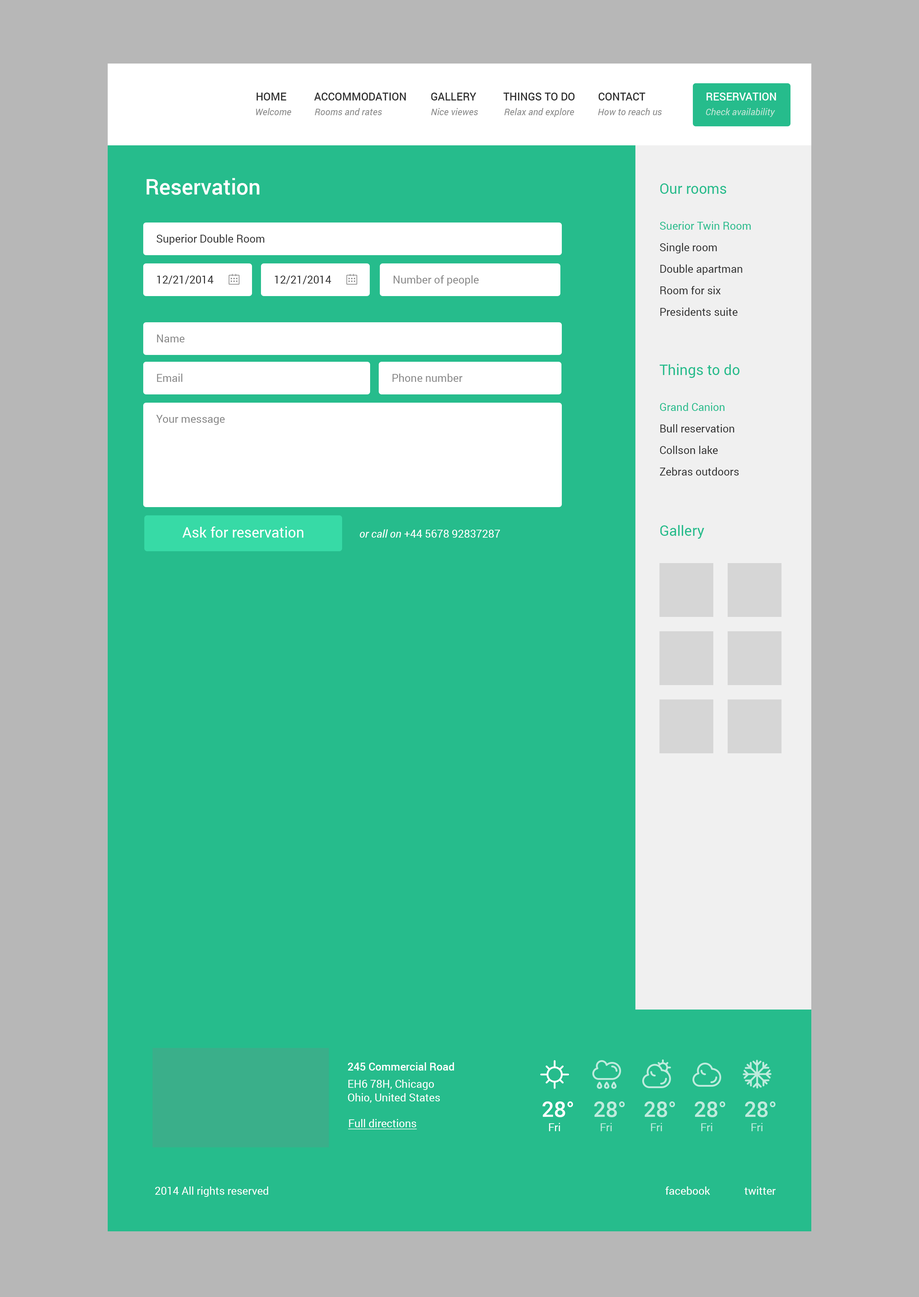
<style>
.page{position:relative;width:919px;height:1297px;background:#26bc8c}
.page>*{position:absolute;margin:0}
.t1{font:10.8px "Roboto-Medium";color:#333333;text-transform:uppercase}
.t2{font:10.8px "Roboto-Medium";color:#fffefe;text-transform:uppercase}
.t3{font:9.3px "Roboto-Italic";color:#888888}
.t4{font:9.3px "Roboto-Italic";color:#bde6d6}
.t5{font:21.5px "Roboto-Medium";color:#ffffff}
.t6{font:14.4px "Roboto-Regular";color:#26bc8c}
.t7{font:10.8px/21.5px "Roboto-Regular";color:#333333}
.t8{font:10.8px/21.5px "Roboto-Regular";color:#26bc8c}
.t9{font:10.8px "Roboto-Regular";color:#333333}
.t10{font:10.8px "Roboto-Regular";color:#888888}
.t11{font:14.4px "Roboto-Regular";color:#ffffff}
.t12{font:10.8px "Roboto-Regular";color:#ffffff}
.t13{font:10.8px "Roboto-Italic";color:#ffffff}
.t14{font:10.8px/13.6px "Roboto-Medium";color:#ffffff}
.t15{font:10.8px/17.2px "Roboto-Regular";color:#ffffff}
.t16{font:10.8px/13.6px "Roboto-Regular";color:#ffffff}
.t17{font:21.5px "Roboto-Medium";color:#beebdd}
.t18{font:10.8px "Roboto-Regular";color:#ffffff;text-decoration:underline}
.t19{font:10.8px "Roboto-Regular";color:#beebdd}
</style>
<div class="page">
<p class="t1" style="left:256px;top:93px;width:30px;height:8px">Home</p>
<p class="t1" style="left:314px;top:93px;width:92px;height:8px">Accommodation</p>
<p class="t1" style="left:431px;top:93px;width:45px;height:8px">Gallery</p>
<p class="t1" style="left:503px;top:93px;width:72px;height:8px">Things to do</p>
<p class="t1" style="left:598px;top:93px;width:47px;height:8px">Contact</p>
<p class="t2" style="left:707px;top:93px;width:69px;height:8px">Reservation</p>
<p class="t3" style="left:256px;top:108px;width:35px;height:7px">Welcome</p>
<p class="t3" style="left:315px;top:108px;width:67px;height:7px">Rooms and rates</p>
<p class="t3" style="left:431px;top:108px;width:47px;height:7px">Nice viewes</p>
<p class="t3" style="left:504px;top:108px;width:70px;height:9px">Relax and explore</p>
<p class="t3" style="left:598px;top:108px;width:64px;height:7px">How to reach us</p>
<p class="t4" style="left:706px;top:108px;width:69px;height:9px">Check availability</p>
<p class="t5" style="left:146px;top:178px;width:114px;height:17px">Reservation</p>
<p class="t6" style="left:660px;top:183px;width:66px;height:11px">Our rooms</p>
<p class="t7" style="left:660px;top:222px;width:91px;height:94px"><span class="t8">Suerior Twin Room<br></span>Single room<br>Double apartman<br>Room for six<br>Presidents suite</p>
<p class="t9" style="left:157px;top:234px;width:108px;height:11px">Superior Double Room</p>
<p class="t9" style="left:157px;top:276px;width:57px;height:8px">12/21/2014</p>
<p class="t9" style="left:275px;top:276px;width:56px;height:8px">12/21/2014</p>
<p class="t10" style="left:393px;top:275px;width:86px;height:11px">Number of people</p>
<p class="t10" style="left:157px;top:335px;width:28px;height:7px">Name</p>
<p class="t6" style="left:659px;top:364px;width:81px;height:14px">Things to do</p>
<p class="t10" style="left:157px;top:374px;width:25px;height:8px">Email</p>
<p class="t10" style="left:392px;top:374px;width:70px;height:8px">Phone number</p>
<p class="t7" style="left:660px;top:403px;width:79px;height:73px"><span class="t8">Grand Canion<br></span>Bull reservation<br>Collson lake<br>Zebras outdoors</p>
<p class="t10" style="left:156px;top:415px;width:69px;height:10px">Your message</p>
<p class="t11" style="left:182px;top:527px;width:121px;height:11px">Ask for reservation</p>
<p class="t12" style="left:360px;top:530px;width:140px;height:8px"><span class="t13">or call on </span>+44 5678 92837287</p>
<p class="t6" style="left:660px;top:525px;width:44px;height:14px">Gallery</p>
<p class="t14" style="left:348px;top:1063px;width:106px;height:40px">245 Commercial Road<br><span class="t15">EH6 78H, Chicago<br></span><span class="t16">Ohio, United States</span></p>
<p class="t5" style="left:542px;top:1102px;width:31px;height:16px">28°</p>
<p class="t17" style="left:594px;top:1102px;width:31px;height:16px">28°</p>
<p class="t17" style="left:644px;top:1102px;width:31px;height:16px">28°</p>
<p class="t17" style="left:695px;top:1102px;width:31px;height:16px">28°</p>
<p class="t17" style="left:745px;top:1102px;width:31px;height:16px">28°</p>
<p class="t18" style="left:348px;top:1119px;width:69px;height:11px">Full directions</p>
<p class="t12" style="left:549px;top:1123px;width:11px;height:9px">Fri</p>
<p class="t19" style="left:601px;top:1123px;width:11px;height:9px">Fri</p>
<p class="t19" style="left:651px;top:1123px;width:11px;height:9px">Fri</p>
<p class="t19" style="left:701px;top:1123px;width:11px;height:9px">Fri</p>
<p class="t19" style="left:751px;top:1123px;width:12px;height:9px">Fri</p>
<p class="t12" style="left:155px;top:1187px;width:113px;height:10px">2014 All rights reserved</p>
<p class="t12" style="left:665px;top:1187px;width:45px;height:8px">facebook</p>
<p class="t12" style="left:745px;top:1187px;width:31px;height:8px">twitter</p>
</div>
